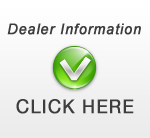
<style>
.page{position:relative;width:150px;height:138px}
.page>*{position:absolute;margin:0}
.t1{font:14.7px "Arial-ItalicMT";letter-spacing:0.05em;color:#3d3d3d;font-weight:bold;scale:0.95 1}
.t2{font:18.9px "HelveticaNeue";letter-spacing:0.05em;color:#3d3d3d;font-weight:bold;scale:0.95 1}
</style>
<div class="page">
<p class="t1" style="left:7px;top:23px;width:134px;height:12px">Dealer Information</p>
<p class="t2" style="left:16px;top:99px;width:118px;height:15px">CLICK HERE</p>
</div>
